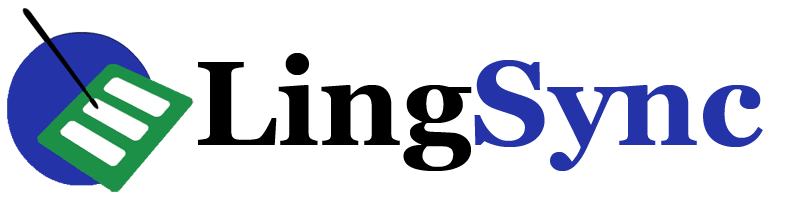
<style>
.page{position:relative;width:800px;height:200px;background:#ffffff}
.page>*{position:absolute;margin:0}
.t1{font:120px "Georgia-Bold";color:#000000}
.t2{font:120px "Georgia-Bold";color:#2433a7}
</style>
<div class="page">
<p class="t1" style="left:198px;top:53px;width:565px;height:118px">Ling<span class="t2">Sync</span></p>
</div>
